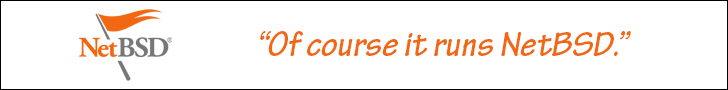
<style>
.page{position:relative;width:728px;height:90px;background:#ffffff}
.page>*{position:absolute;margin:0}
.t1{font:36px "TektonPro-BoldObl";color:#f26711}
</style>
<div class="page">
<p class="t1" style="left:260px;top:31px;width:371px;height:25px">“Of course it runs NetBSD.”</p>
</div>
